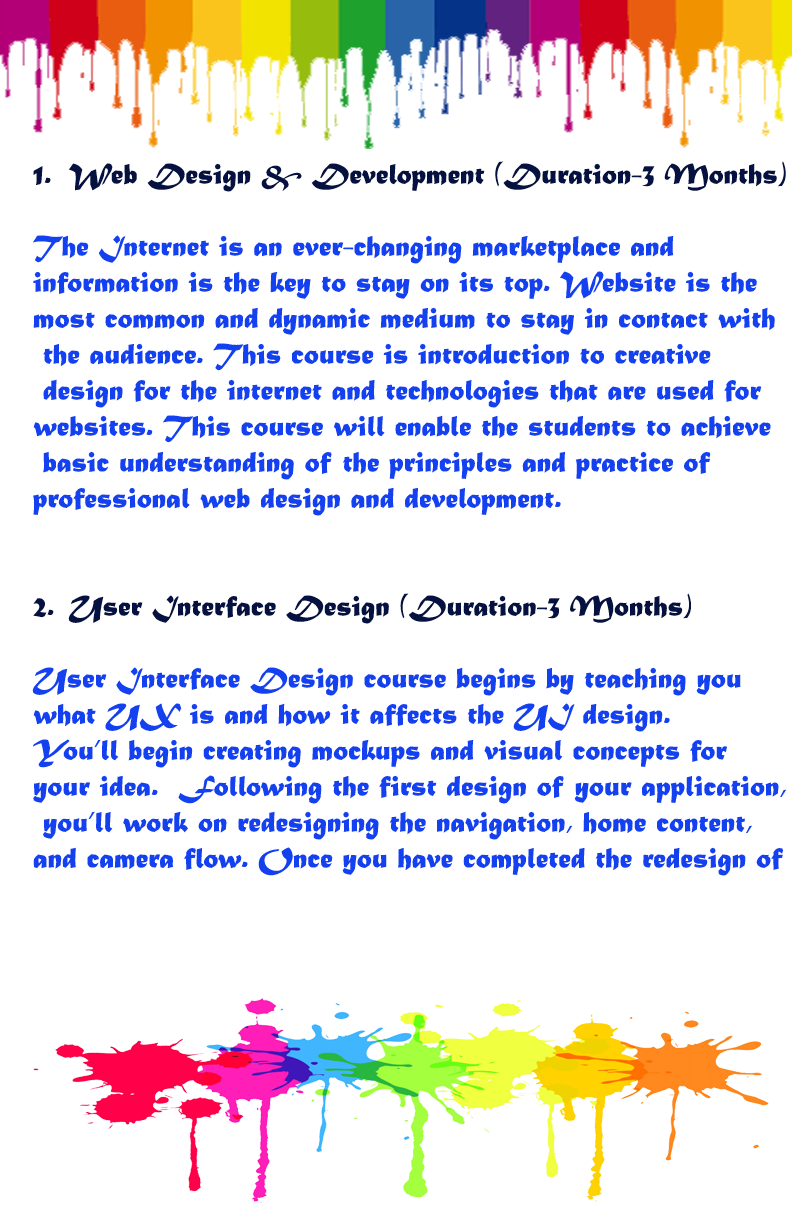
<style>
.page{position:relative;width:792px;height:1224px;background:#ffffff}
.page>*{position:absolute;margin:0}
.t1{font:30px "MaturaMTScriptCapitals";color:#1341f0}
.t2{font:30px "MaturaMTScriptCapitals";color:#051140}
</style>
<div class="page">
<p class="t1" style="left:32px;top:161px;width:754px;height:715px"><span class="t2">1. Web Design &amp; Development (Duration-3 Months)<br><br></span>The Internet is an ever-changing marketplace and <br>information is the key to stay on its top. Website is the <br>most common and dynamic medium to stay in contact with<br> the audience. This course is introduction to creative<br> design for the internet and technologies that are used for <br>websites. This course will enable the students to achieve<br> basic understanding of the principles and practice of <br>professional web design and development.<br><span class="t2"><br><br>2. User Interface Design (Duration-3 Months)<br></span><br>User Interface Design course begins by teaching you <br>what UX is and how it affects the UI design. <br>You’ll begin creating mockups and visual concepts for <br>your idea.  Following the first design of your application,<br> you’ll work on redesigning the navigation, home content, <br>and camera flow. Once you have completed the redesign of</p>
</div>
